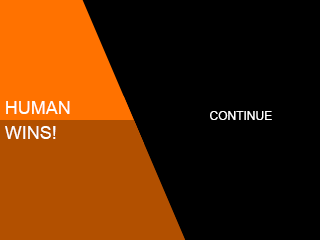
<style>
.page{position:relative;width:320px;height:240px;background:#000000}
.page>*{position:absolute;margin:0}
.t1{font:18px "ArialUnicodeMS";color:#ffffff}
.t2{font:12px "ArialUnicodeMS";color:#ffffff}
</style>
<div class="page">
<p class="t1" style="left:6px;top:101px;width:64px;height:13px">HUMAN</p>
<p class="t2" style="left:210px;top:111px;width:62px;height:9px">CONTINUE</p>
<p class="t1" style="left:5px;top:126px;width:51px;height:13px">WINS!</p>
</div>
